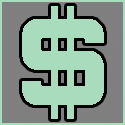
<style>
.page{position:relative;width:125px;height:125px;background:#a8dcbc}
.page>*{position:absolute;margin:0}
.t1{font:130px "E-SQUARE";color:#a8dcbc}
</style>
<div class="page">
<p class="t1" style="left:22px;top:6px;width:82px;height:113px">$</p>
</div>
